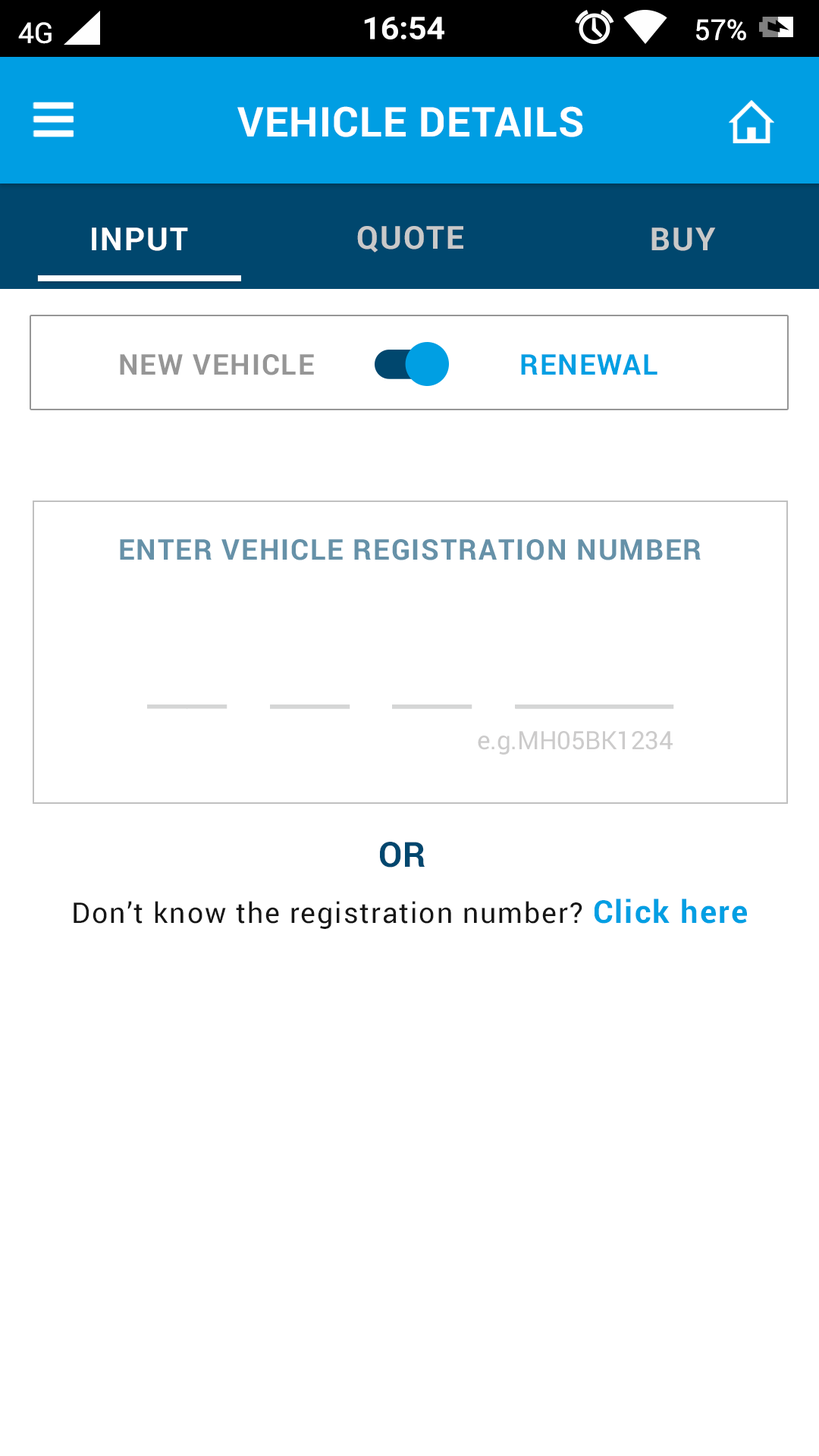
<style>
.page{position:relative;width:819px;height:1456px;background:#ffffff}
.page>*{position:absolute;margin:0}
.t1{font:41.1px "Roboto-Bold";letter-spacing:0.025em;color:#ffffff}
.t2{font:31.6px "Roboto-Bold";letter-spacing:0.05em;color:#ffffff}
.t3{font:31.6px "Roboto-Bold";letter-spacing:0.05em;color:#c9c9c9}
.t4{font:28.4px "Roboto-Bold";letter-spacing:0.05em;color:#969696}
.t5{font:28.4px "Roboto-Bold";letter-spacing:0.05em;color:#009fe3}
.t6{font:34.8px "Roboto-Bold";letter-spacing:0.025em;color:#00476e}
.t7{font:28.4px "Roboto-Regular";letter-spacing:0.05em;color:#161616}
.t8{font:31.6px "Roboto-Bold";letter-spacing:0.05em;color:#009fe3}
</style>
<div class="page">
<p class="t1" style="left:237px;top:106px;width:346px;height:31px">VEHICLE DETAILS</p>
<p class="t2" style="left:92px;top:227px;width:96px;height:24px">INPUT</p>
<p class="t3" style="left:357px;top:226px;width:106px;height:27px">QUOTE</p>
<p class="t3" style="left:651px;top:227px;width:65px;height:24px">BUY</p>
<p class="t4" style="left:120px;top:354px;width:194px;height:21px">NEW VEHICLE</p>
<p class="t5" style="left:521px;top:354px;width:136px;height:21px">RENEWAL</p>
<p class="t6" style="left:380px;top:842px;width:45px;height:26px">OR</p>
<p class="t7" style="left:74px;top:899px;width:673px;height:30px">Don’t know the registration number? <span class="t8">Click here</span></p>
</div>
